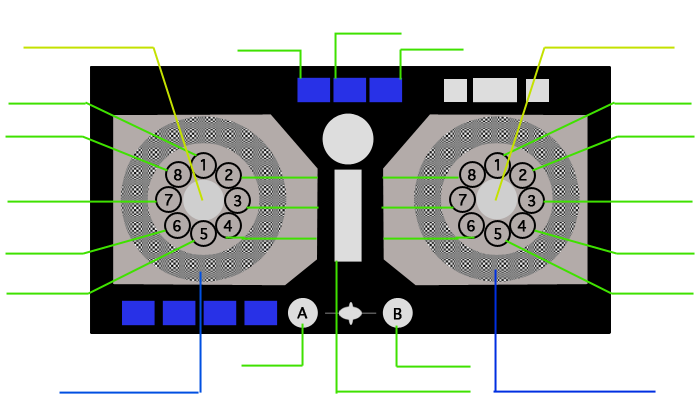
<style>
.page{position:relative;width:700px;height:400px;background:#ffffff}
.page>*{position:absolute;margin:0}
.t1{font:14px "GenevaCY";color:#000000;font-weight:bold}
</style>
<div class="page">
<p class="t1" style="left:200px;top:159px;width:5px;height:12px">1</p>
<p class="t1" style="left:494px;top:159px;width:5px;height:12px">1</p>
<p class="t1" style="left:173px;top:169px;width:9px;height:12px">8</p>
<p class="t1" style="left:225px;top:169px;width:8px;height:12px">2</p>
<p class="t1" style="left:467px;top:169px;width:9px;height:12px">8</p>
<p class="t1" style="left:519px;top:169px;width:8px;height:12px">2</p>
<p class="t1" style="left:164px;top:194px;width:9px;height:12px">7</p>
<p class="t1" style="left:234px;top:195px;width:8px;height:12px">3</p>
<p class="t1" style="left:458px;top:194px;width:9px;height:12px">7</p>
<p class="t1" style="left:528px;top:195px;width:8px;height:12px">3</p>
<p class="t1" style="left:173px;top:220px;width:8px;height:12px">6</p>
<p class="t1" style="left:223px;top:220px;width:10px;height:12px">4</p>
<p class="t1" style="left:467px;top:220px;width:8px;height:12px">6</p>
<p class="t1" style="left:517px;top:220px;width:10px;height:12px">4</p>
<p class="t1" style="left:200px;top:228px;width:8px;height:12px">5</p>
<p class="t1" style="left:494px;top:228px;width:8px;height:12px">5</p>
<p class="t1" style="left:297px;top:307px;width:11px;height:12px">A</p>
<p class="t1" style="left:393px;top:308px;width:9px;height:12px">B</p>
</div>
